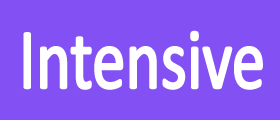
<style>
.page{position:relative;width:280px;height:120px;background:#8350f3}
.page>*{position:absolute;margin:0}
.t1{font:86.7px "Calibri";letter-spacing:-0.025em;color:#ffffff;font-weight:bold;scale:0.77 1}
</style>
<div class="page">
<p class="t1" style="left:23px;top:30px;width:240px;height:60px">Intensive</p>
</div>
